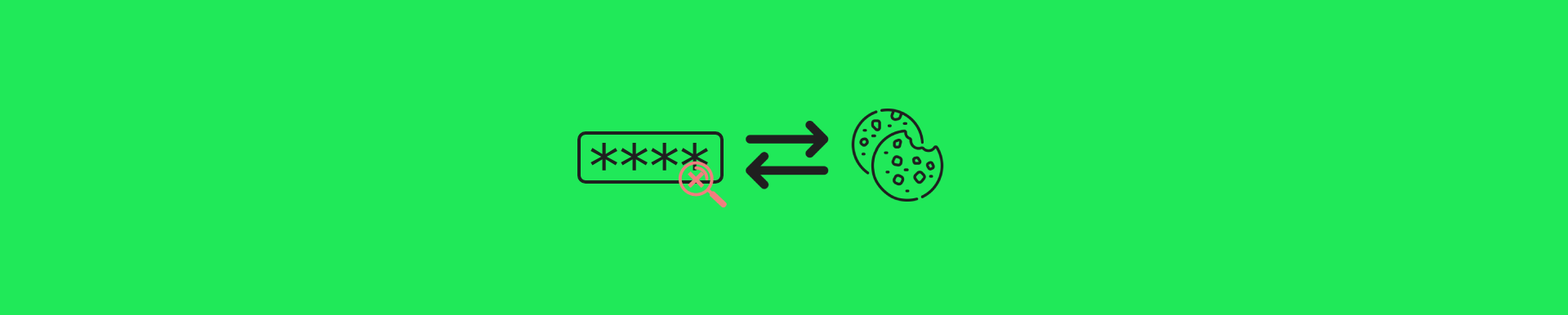
<style>
.page{position:relative;width:1568px;height:315px;background:#20e959}
.page>*{position:absolute;margin:0}
.t1{font:60.4px "HACKED";color:#1f1f1f}
</style>
<div class="page">
<p class="t1" style="left:590px;top:143px;width:118px;height:28px">****</p>
</div>
